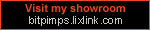
<style>
.page{position:relative;width:150px;height:30px;background:#000000}
.page>*{position:absolute;margin:0}
.t1{font:11px "Arial-BoldMT";color:#ef4427}
.t2{font:11px "ArialMT";color:#c7c7c7}
</style>
<div class="page">
<p class="t1" style="left:25px;top:4px;width:100px;height:11px">Visit my showroom</p>
<p class="t2" style="left:29px;top:16px;width:93px;height:10px">bitpimps.lixlink.com</p>
</div>
